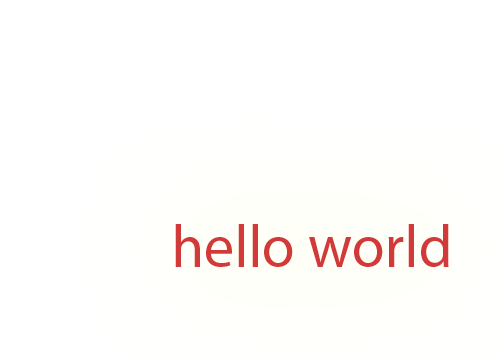
<style>
.page{position:relative;width:504px;height:360px;background:#ffffff}
.page>*{position:absolute;margin:0}
.t1{font:60px "MyriadPro-Regular";color:#d23939}
</style>
<div class="page">
<p class="t1" style="left:175px;top:224px;width:274px;height:43px">hello world</p>
</div>
